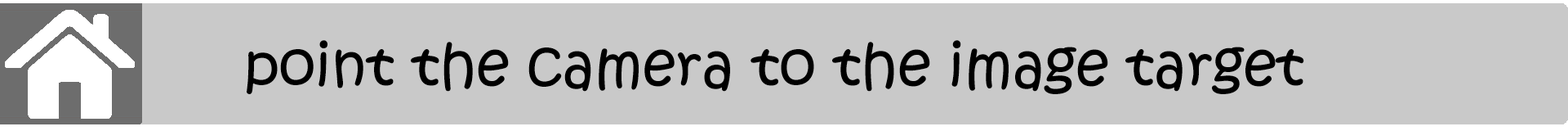
<style>
.page{position:relative;width:1568px;height:131px;background:#c9c9c9}
.page>*{position:absolute;margin:0}
.t1{font:58.8px "KristenITC-Regular";color:#000000}
</style>
<div class="page">
<p class="t1" style="left:247px;top:40px;width:1057px;height:54px">point the camera to the image target</p>
</div>
